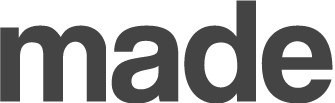
<style>
.page{position:relative;width:335px;height:103px;background:#ffffff}
.page>*{position:absolute;margin:0}
.t1{font:150px "CoolveticaRg-Regular";color:#444444}
</style>
<div class="page">
<p class="t1" style="left:0px;top:0px;width:333px;height:103px">made</p>
</div>
